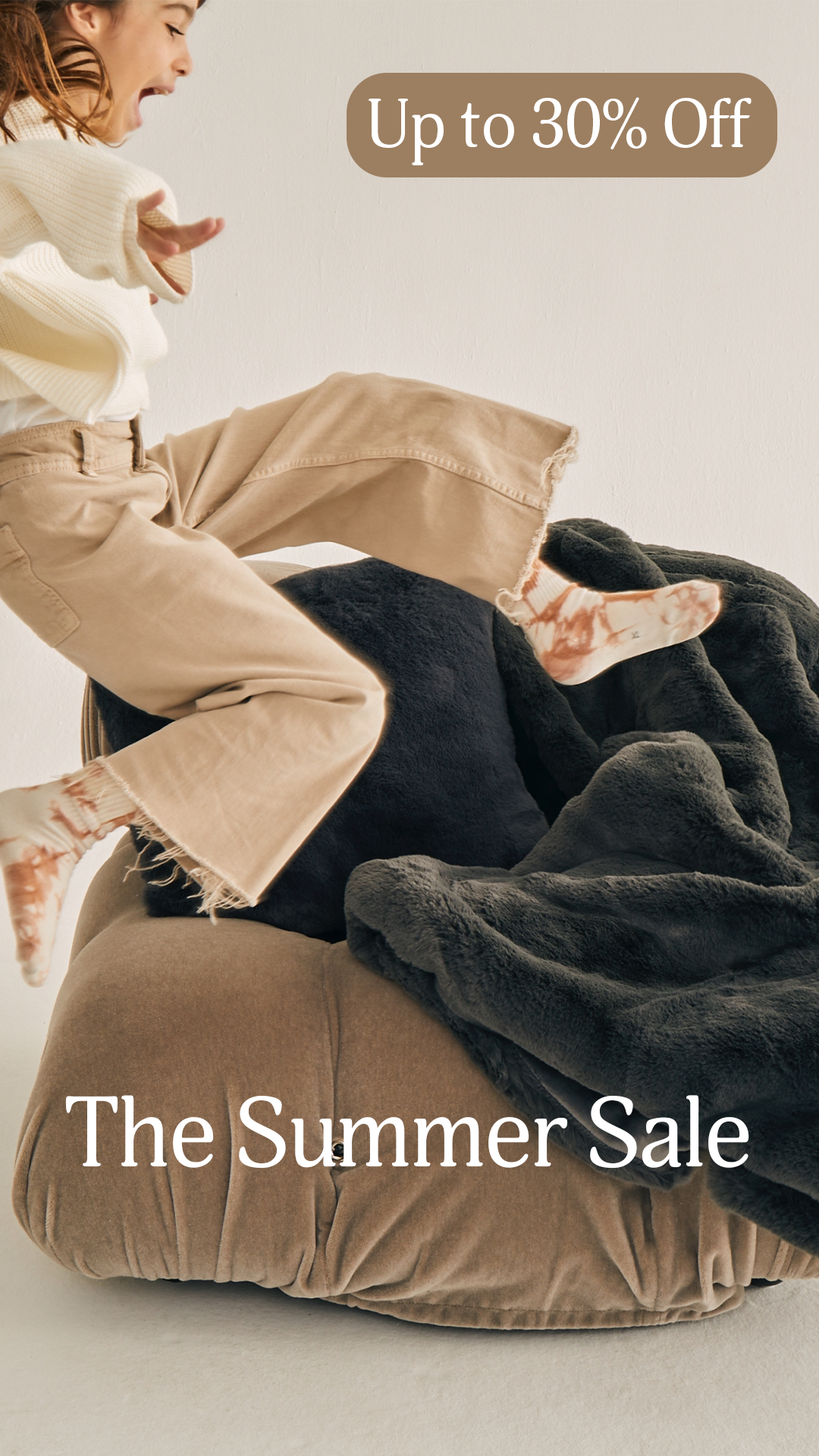
<style>
.page{position:relative;width:819px;height:1456px}
.page>*{position:absolute;margin:0}
.t1{font:67.9px "AdonisC";letter-spacing:-0.02em;color:#ffffff}
.t2{font:98px "AdonisC";letter-spacing:-0.02em;color:#ffffff}
</style>
<div class="page">
<p class="t1" style="left:369px;top:97px;width:382px;height:68px">Up to 30% Off</p>
<p class="t2" style="left:65px;top:1095px;width:684px;height:74px">The Summer Sale</p>
</div>
